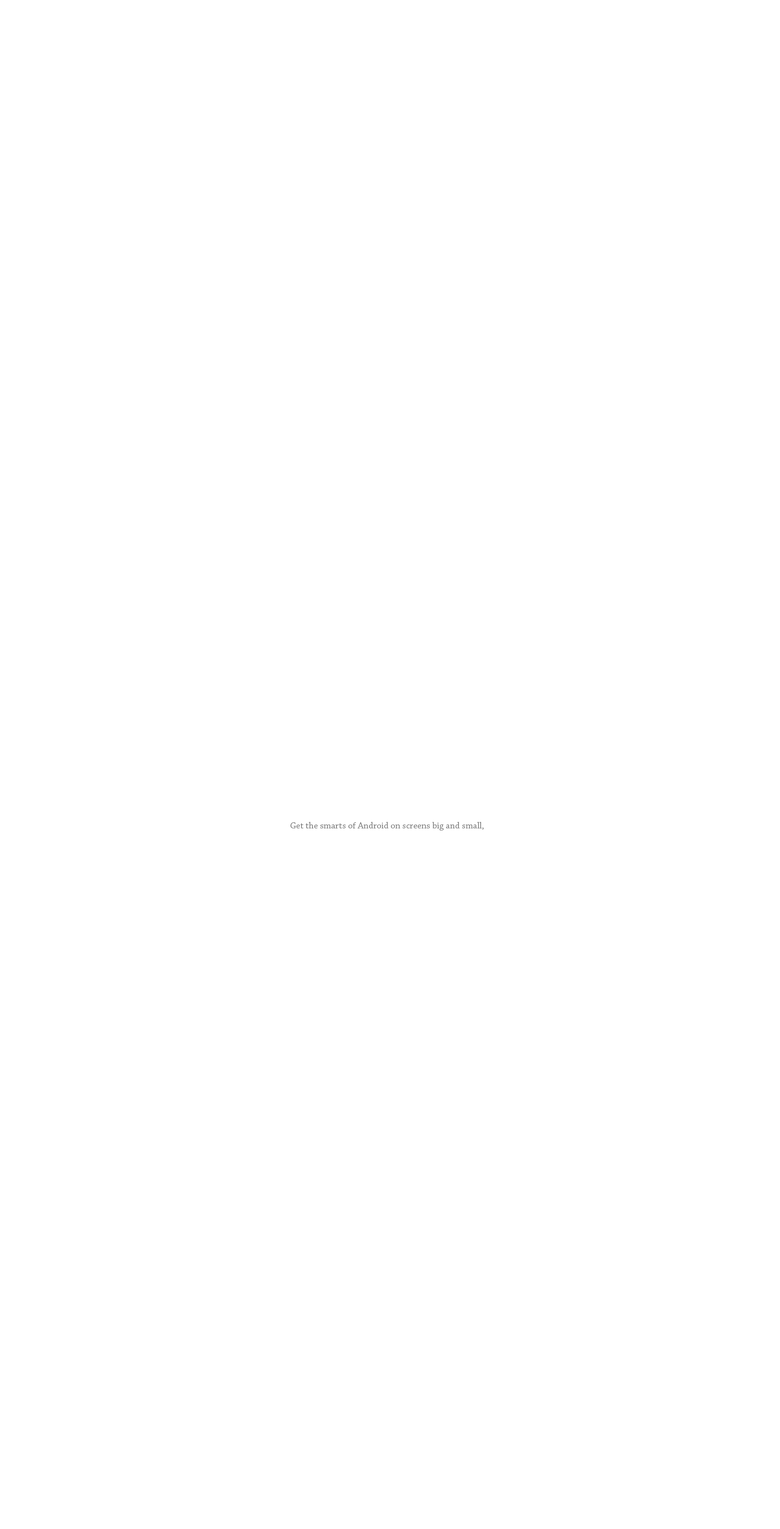
<style>
.page{position:relative;width:780px;height:1529px;background:#ffffff}
.page>*{position:absolute;margin:0}
.t1{font:9.1px "ChaparralPro-Regular";letter-spacing:0.005em;color:#7c7c7c}
</style>
<div class="page">
<p class="t1" style="left:290px;top:822px;width:193px;height:9px">Get the smarts of Android on screens big and small,</p>
</div>
